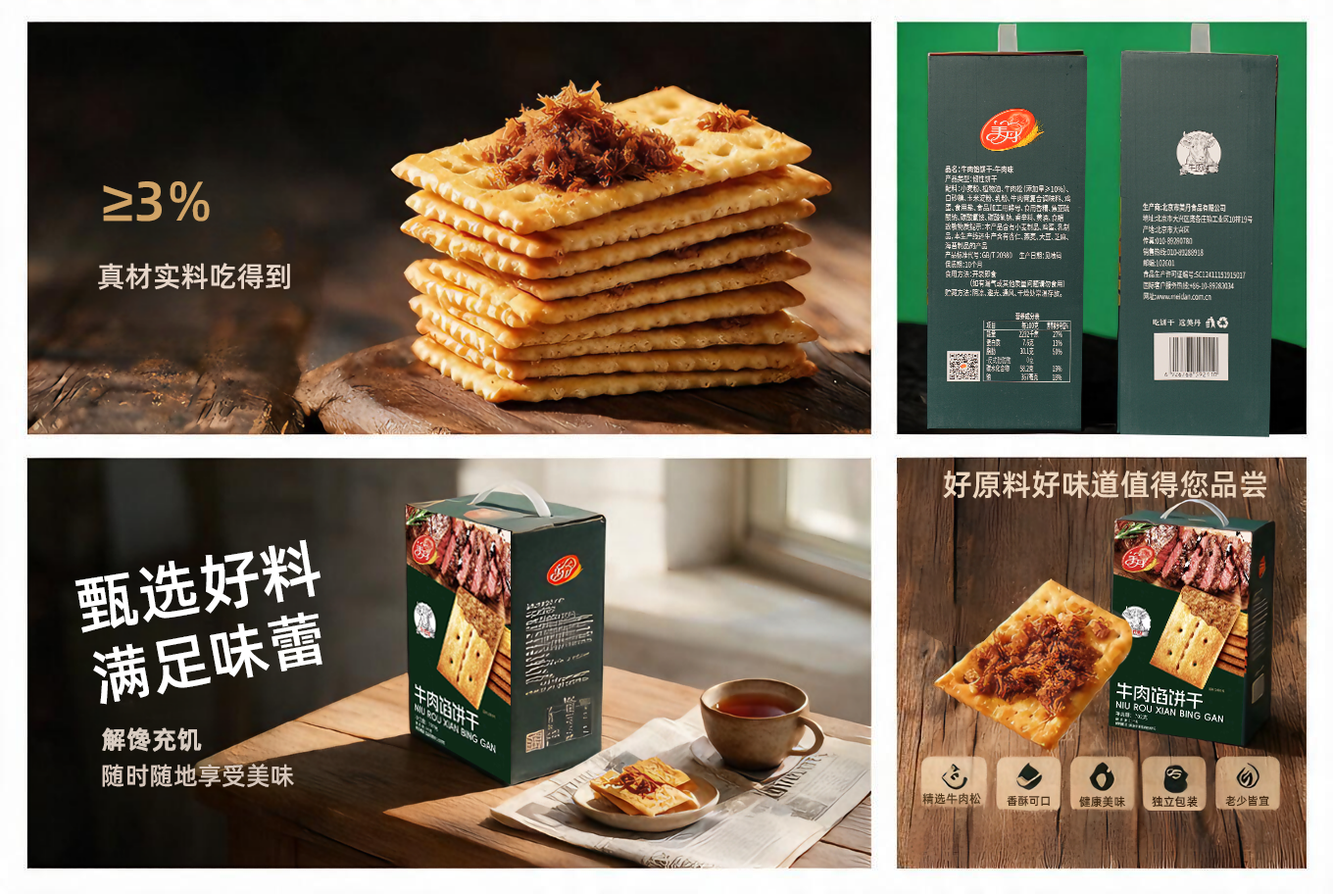
<style>
.page{position:relative;width:1333px;height:894px}
.page>*{position:absolute;margin:0}
.t1{font:55.7px "AlibabaPuHuiTi-Medium";color:#d0a366}
.t2{font:28.4px "AlibabaPuHuiTi-Medium";color:#e7d6c9}
.t3{font:30.1px "AlibabaPuHuiTi-Medium";color:#edd7bf}
.t4{font:63.2px "AlibabaPuHuiTi-Medium";color:#ffffff}
.t5{font:60.5px "AlibabaPuHuiTi-Medium";color:#ffffff}
.t6{font:24.8px "AlibabaPuHuiTi-Medium";color:#d8ccc1;font-weight:bold}
.t7{font:24.6px "AlibabaPuHuiTi-Medium";color:#d7c7bb}
.t8{font:12px "AlibabaPuHuiTi-Medium";color:#4e3517}
.t9{font:11.3px "AlibabaPuHuiTi-Medium";color:#482e15}
.t10{font:11.8px "AlibabaPuHuiTi-Medium";color:#432a10}
.t11{font:11.8px "AlibabaPuHuiTi-Medium";color:#39200c}
.t12{font:11.3px "AlibabaPuHuiTi-Medium";color:#432910}
</style>
<div class="page">
<p class="t1" style="left:103px;top:181px;width:107px;height:41px">≥3%</p>
<p class="t2" style="left:98px;top:263px;width:192px;height:27px">真材实料吃得到</p>
<p class="t3" style="left:943px;top:470px;width:324px;height:29px">好原料好味道值得您品尝</p>
<p class="t4" style="left:75px;top:539px;width:246px;height:94px;rotate:-9deg">甄选好料</p>
<p class="t5" style="left:93px;top:612px;width:230px;height:93px;rotate:-10deg">满足味蕾</p>
<p class="t6" style="left:102px;top:728px;width:100px;height:24px">解馋充饥</p>
<p class="t7" style="left:102px;top:764px;width:192px;height:23px">随时随地享受美味</p>
<p class="t8" style="left:923px;top:793px;width:58px;height:12px">精选牛肉松</p>
<p class="t9" style="left:1007px;top:795px;width:43px;height:12px">香酥可口</p>
<p class="t10" style="left:1080px;top:796px;width:46px;height:12px">健康美味</p>
<p class="t11" style="left:1152px;top:796px;width:46px;height:12px">独立包装</p>
<p class="t12" style="left:1226px;top:795px;width:44px;height:12px">老少皆宜</p>
</div>
